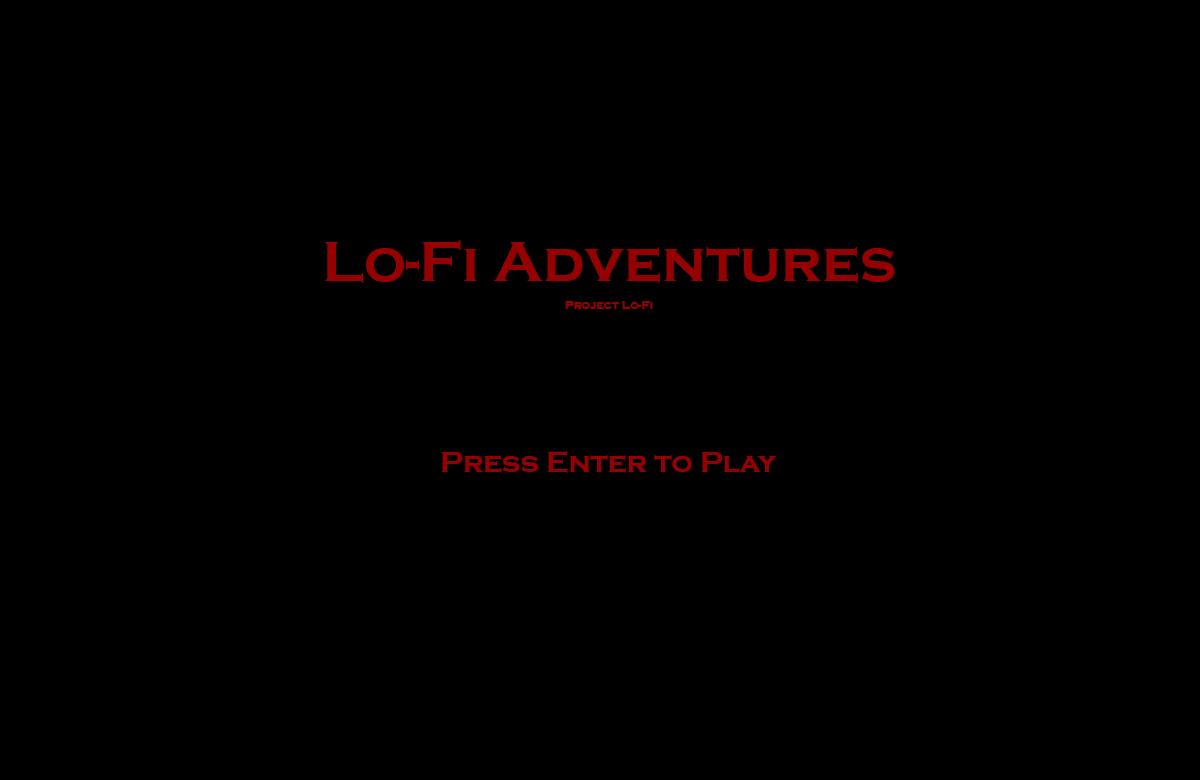
<style>
.page{position:relative;width:1200px;height:780px;background:#000000}
.page>*{position:absolute;margin:0}
.t1{font:59.3px "CopperplateGothic-Bold";color:#950000}
.t2{font:11.9px "CopperplateGothic-Bold";color:#950000}
.t3{font:29.6px "CopperplateGothic-Bold";color:#950000}
</style>
<div class="page">
<p class="t1" style="left:325px;top:240px;width:570px;height:69px;text-align:center">Lo-Fi Adventures<br><span class="t2"><br>Project Lo-Fi</span></p>
<p class="t3" style="left:441px;top:451px;width:336px;height:22px">Press Enter to Play</p>
</div>
